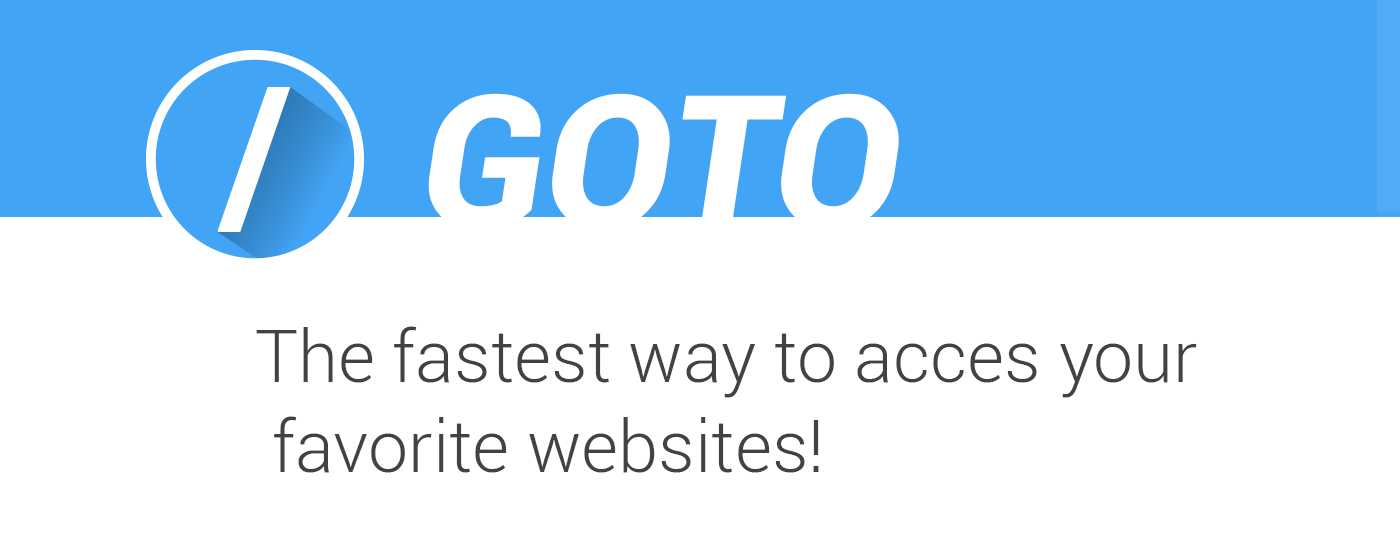
<style>
.page{position:relative;width:1400px;height:560px;background:#ffffff}
.page>*{position:absolute;margin:0}
.t1{font:186.4px "Roboto-BlackItalic";color:#ffffff}
.t2{font:72.1px/90px "Roboto-Light";color:#424242}
</style>
<div class="page">
<p class="t1" style="left:428px;top:93px;width:471px;height:137px">GOTO</p>
<p class="t2" style="left:256px;top:326px;width:941px;height:147px">The fastest way to acces your<br> favorite websites!</p>
</div>
